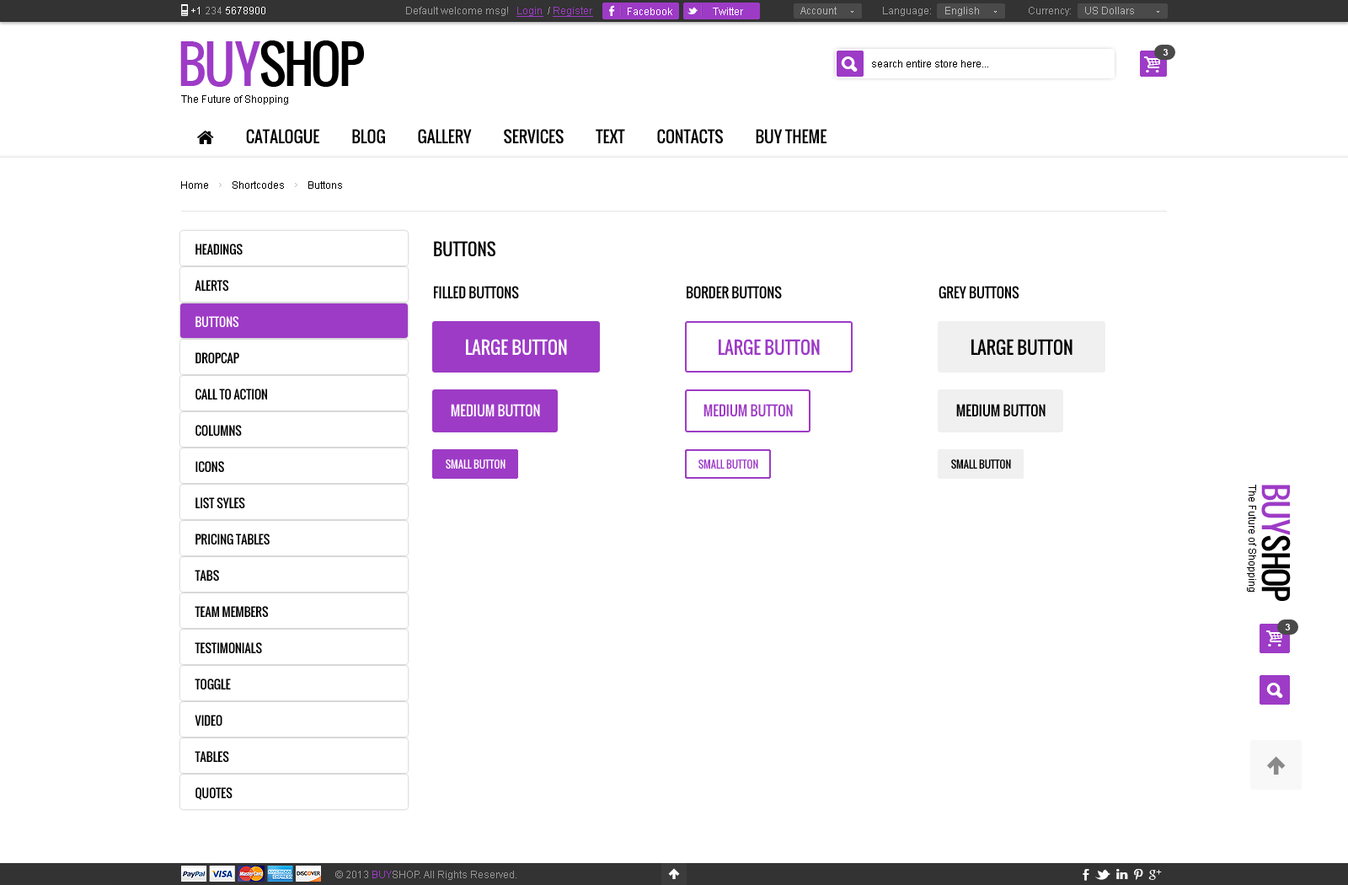
<style>
.page{position:relative;width:1348px;height:885px;background:#ffffff}
.page>*{position:absolute;margin:0}
.t1{font:10.1px "ArialMT";color:#ffffff}
.t2{font:10.1px "ArialMT";color:#9b9b9b}
.t3{font:10.1px "ArialMT";color:#9d3bc6;text-decoration:underline}
.t4{font:10.1px "ArialMT";color:#b6b6b6}
.t5{font:50.5px "Oswald";letter-spacing:-0.06em;color:#000000;text-transform:uppercase}
.t6{font:50.5px "Oswald";letter-spacing:-0.06em;color:#9d3bc6;text-transform:uppercase}
.t7{font:9.3px "Arial-BoldMT";color:#ffffff;text-transform:uppercase}
.t8{font:10.1px "ArialMT";color:#000000}
.t9{font:11.8px/36.2px "Oswald";color:#000000;text-transform:uppercase}
.t10{font:11.8px/36.2px "Oswald";color:#ffffff;text-transform:uppercase}
.t11{font:16.8px "Oswald";color:#000000;text-transform:uppercase}
.t12{font:13.5px "Oswald";color:#000000;text-transform:uppercase}
.t13{font:17.6px "Oswald";color:#ffffff;text-transform:uppercase}
.t14{font:17.6px "Oswald";color:#9d3bc6;text-transform:uppercase}
.t15{font:17.6px "Oswald";color:#010101;text-transform:uppercase}
.t16{font:13.5px "Oswald";color:#ffffff;text-transform:uppercase}
.t17{font:13.5px "Oswald";color:#9d3bc6;text-transform:uppercase}
.t18{font:10.1px "Oswald";color:#ffffff;text-transform:uppercase}
.t19{font:10.1px "Oswald";color:#9d3bc6;text-transform:uppercase}
.t20{font:10.1px "Oswald";color:#000000;text-transform:uppercase}
.t21{font:32px "Oswald";letter-spacing:-0.06em;color:#000000;text-transform:uppercase}
.t22{font:32px "Oswald";letter-spacing:-0.06em;color:#9d3bc6;text-transform:uppercase}
.t23{font:10.1px "ArialMT";color:#959595}
.t24{font:10.1px "ArialMT";color:#9d3bc6}
</style>
<div class="page">
<p class="t1" style="left:191px;top:7px;width:74px;height:7px">+1 <span class="t2">234 </span>5678900</p>
<p class="t2" style="left:406px;top:7px;width:187px;height:10px">Default welcome msg!   <span class="t3">Login </span> / <span class="t3">Register</span></p>
<p class="t2" style="left:406px;top:7px;width:187px;height:10px">Default welcome msg!   <span class="t3">Login </span> / <span class="t3">Register</span></p>
<p class="t1" style="left:628px;top:8px;width:44px;height:7px">Facebook</p>
<p class="t1" style="left:713px;top:8px;width:30px;height:7px">Twitter</p>
<p class="t4" style="left:800px;top:7px;width:37px;height:7px">Account</p>
<p class="t2" style="left:883px;top:7px;width:96px;height:9px">Language:     <span class="t4">English</span></p>
<p class="t4" style="left:1029px;top:7px;width:105px;height:9px"><span class="t2">Currency:     </span>US Dollars</p>
<p class="t5" style="left:180px;top:40px;width:184px;height:47px"><span class="t6">buy</span>shop</p>
<p class="t7" style="left:1163px;top:49px;width:6px;height:7px">3</p>
<p class="t8" style="left:872px;top:60px;width:116px;height:7px">search entire store here...</p>
<p class="t8" style="left:181px;top:95px;width:107px;height:9px">The Future of Shopping</p>
<p class="t8" style="left:181px;top:181px;width:161px;height:8px">Home         Shortcodes         Buttons</p>
<p class="t9" style="left:195px;top:243px;width:75px;height:557px">Headings<br>Alerts<br><span class="t10">Buttons<br></span>Dropcap<br>Call To Action<br>Columns<br>Icons<br>List syles<br>Pricing Tables<br>Tabs<br>Team Members<br>Testimonials<br>Toggle<br>Video<br>Tables<br>Quotes</p>
<p class="t11" style="left:434px;top:241px;width:61px;height:16px">Buttons</p>
<p class="t12" style="left:434px;top:286px;width:85px;height:13px">FILLED BUTTONS</p>
<p class="t12" style="left:687px;top:286px;width:95px;height:13px">Border BUTTONS</p>
<p class="t12" style="left:939px;top:286px;width:80px;height:13px">Grey BUTTONS</p>
<p class="t13" style="left:466px;top:339px;width:101px;height:17px">Large Button</p>
<p class="t14" style="left:719px;top:339px;width:101px;height:17px">Large Button</p>
<p class="t15" style="left:971px;top:339px;width:101px;height:17px">Large Button</p>
<p class="t16" style="left:451px;top:404px;width:89px;height:13px">Medium button</p>
<p class="t17" style="left:703px;top:404px;width:90px;height:13px">Medium button</p>
<p class="t12" style="left:956px;top:404px;width:90px;height:13px">Medium button</p>
<p class="t18" style="left:446px;top:459px;width:59px;height:9px">Small Button</p>
<p class="t19" style="left:698px;top:459px;width:60px;height:9px">Small Button</p>
<p class="t20" style="left:951px;top:459px;width:60px;height:9px">Small Button</p>
<p class="t8" style="left:1247px;top:484px;width:9px;height:107px;rotate:90deg">The Future of Shopping</p>
<p class="t21" style="left:1261px;top:484px;width:30px;height:117px;rotate:90deg"><span class="t22">buy</span>shop</p>
<p class="t7" style="left:1285px;top:623px;width:6px;height:7px">3</p>
<p class="t23" style="left:335px;top:870px;width:181px;height:10px">© 2013 <span class="t24">BUY</span>SHOP. All Rights Reserved.</p>
</div>
